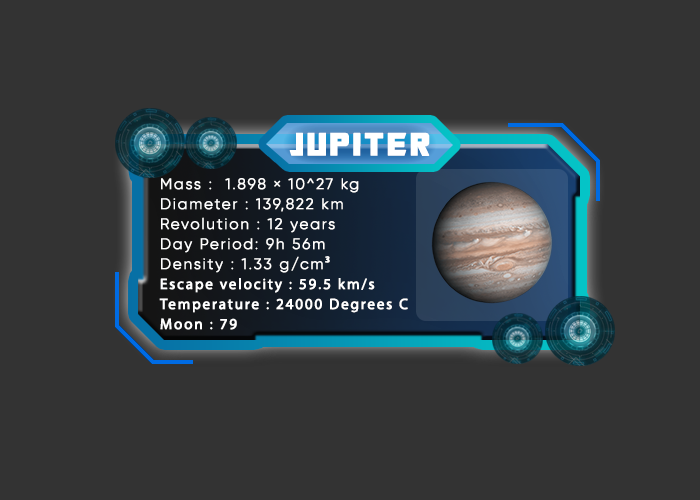
<style>
.page{position:relative;width:700px;height:500px;background:#333333}
.page>*{position:absolute;margin:0}
.t1{font:35px "TransformersMovie";letter-spacing:0.1em;color:#ffffff;font-weight:bold}
.t2{font:15px/20px "Gilroy-Light";letter-spacing:0.1em;color:#ffffff;font-weight:bold}
.t3{font:15px/20px "MyriadPro-Regular";letter-spacing:0.1em;color:#ffffff;font-weight:bold}
</style>
<div class="page">
<p class="t1" style="left:289px;top:132px;width:141px;height:24px">JUPITER</p>
<p class="t2" style="left:159px;top:178px;width:249px;height:152px">Mass :  1.898 × 10^27 kg<br>Diameter : 139,822 km<br>Revolution : 12 years<br>Day Period: 9h 56m<br>Density : 1.33 g/cm<span class="t3">³<br>Escape velocity : 59.5 km/s<br>Temperature : 24000 Degrees C<br>Moon : 79</span></p>
</div>
